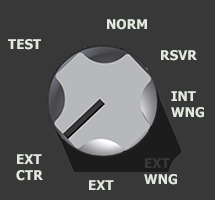
<style>
.page{position:relative;width:215px;height:200px;background:#383838}
.page>*{position:absolute;margin:0}
.t1{font:13.3px "Tahoma-Bold";color:#e1e8de}
.t2{font:13.3px "Tahoma-Bold";color:#383838}
</style>
<div class="page">
<p class="t1" style="left:107px;top:19px;width:40px;height:11px">NORM</p>
<p class="t1" style="left:8px;top:39px;width:33px;height:11px">TEST</p>
<p class="t1" style="left:161px;top:50px;width:36px;height:11px">RSVR</p>
<p class="t1" style="left:171px;top:91px;width:33px;height:27px">INT<br>WNG</p>
<p class="t1" style="left:16px;top:154px;width:27px;height:27px">EXT<br>CTR</p>
<p class="t2" style="left:144px;top:158px;width:33px;height:27px">EXT<br><span class="t1">WNG</span></p>
<p class="t1" style="left:89px;top:180px;width:25px;height:10px">EXT</p>
</div>
